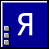
<style>
.page{position:relative;width:49px;height:49px;background:#000096}
.page>*{position:absolute;margin:0}
.t1{font:30px "DejaVuSansCondensed";color:#ffffff}
</style>
<div class="page">
<p class="t1" style="left:17px;top:13px;width:16px;height:23px">Я</p>
</div>
